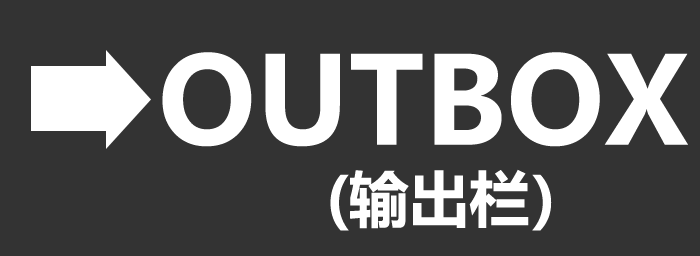
<style>
.page{position:relative;width:700px;height:256px;background:#333333}
.page>*{position:absolute;margin:0}
.t1{font:120px "MicrosoftYaHei-Bold";color:#ffffff}
.t2{font:60px "MicrosoftYaHei-Bold";color:#ffffff}
</style>
<div class="page">
<p class="t1" style="left:162px;top:52px;width:526px;height:95px">OUTBOX</p>
<p class="t2" style="left:330px;top:169px;width:222px;height:62px">(输出栏）</p>
</div>
